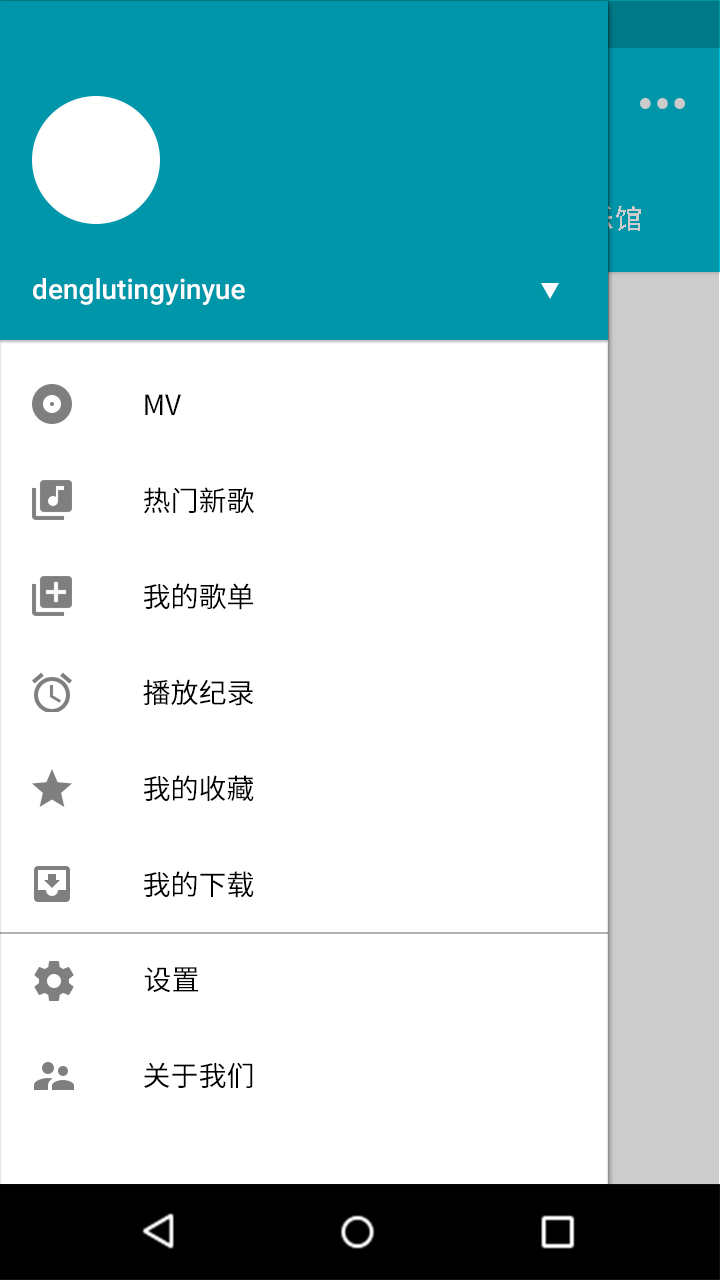
<style>
.page{position:relative;width:720px;height:1280px;background:#ffffff}
.page>*{position:absolute;margin:0}
.t1{font:28px "SourceHanSansCN-Medium";letter-spacing:0.03em}
.t2{font:28px "Roboto-Medium";color:#ffffff}
.t3{font:28px "SourceHanSansCN-Regular";color:#000000}
</style>
<div class="page">
<p class="t1" style="left:559px;top:205px;width:82px;height:26px">音乐馆</p>
<p class="t2" style="left:33px;top:278px;width:212px;height:27px">denglutingyinyue</p>
<p class="t3" style="left:145px;top:394px;width:36px;height:21px">MV</p>
<p class="t3" style="left:144px;top:487px;width:110px;height:27px">热门新歌</p>
<p class="t3" style="left:143px;top:583px;width:110px;height:27px">我的歌单</p>
<p class="t3" style="left:143px;top:679px;width:111px;height:27px">播放纪录</p>
<p class="t3" style="left:143px;top:775px;width:111px;height:26px">我的收藏</p>
<p class="t3" style="left:143px;top:871px;width:111px;height:27px">我的下载</p>
<p class="t3" style="left:144px;top:967px;width:54px;height:26px">设置</p>
<p class="t3" style="left:144px;top:1062px;width:109px;height:26px">关于我们</p>
</div>
